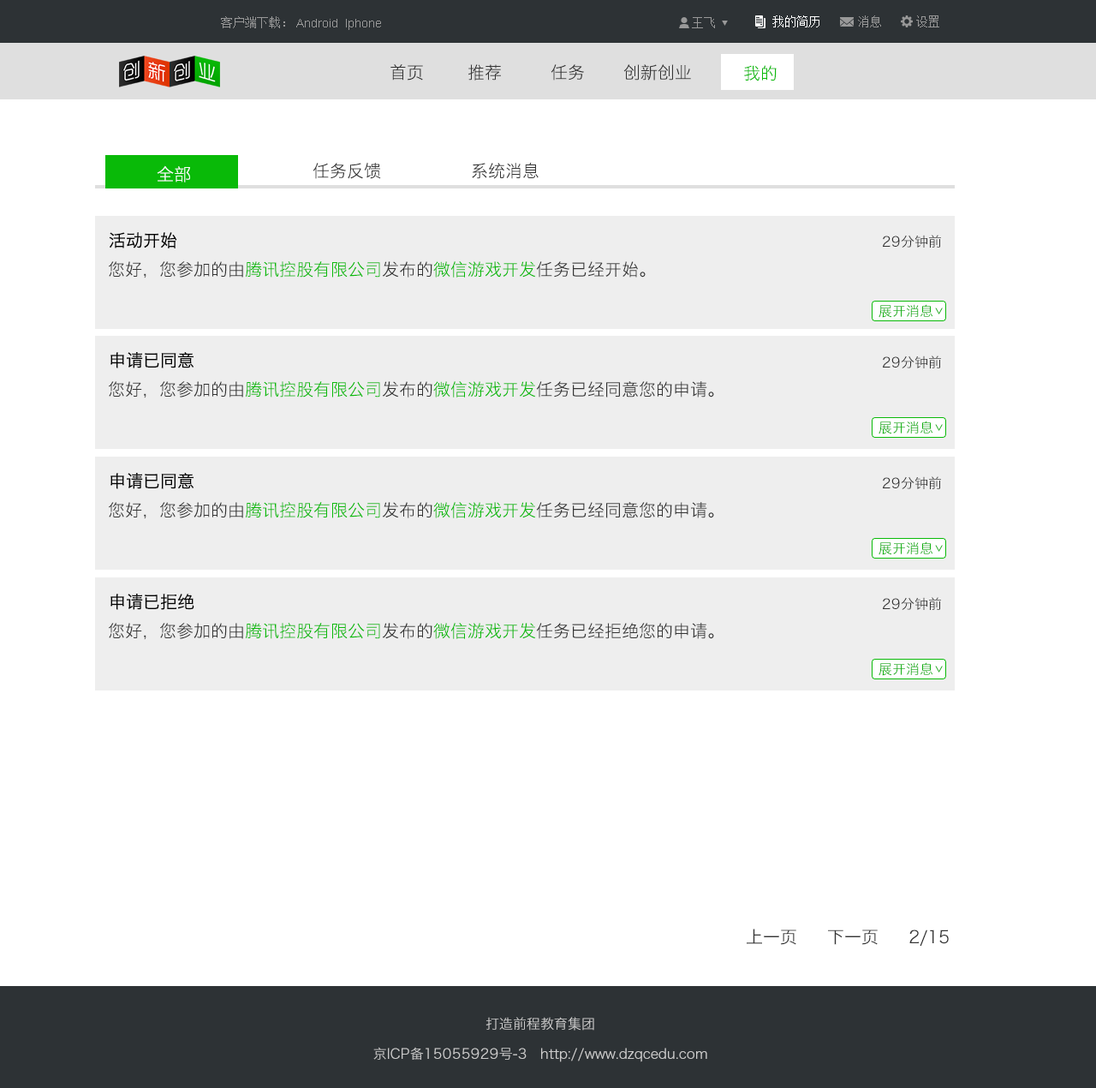
<style>
.page{position:relative;width:1096px;height:1088px;background:#ffffff}
.page>*{position:absolute;margin:0}
.t1{font:12px "SimSun";color:#999999}
.t2{font:12px "SimSun";color:#ffffff}
.t3{font:12px "ArialMT";color:#999999}
.t4{font:17.1px "HiraginoSansGB-W3";color:#333333}
.t5{font:17.1px "HiraginoSansGB-W3";color:#09ba08}
.t6{font:17.1px "HiraginoSansGB-W3";color:#ffffff}
.t7{font:17.1px "HiraginoSansGB-W3";color:#000000}
.t8{font:13.7px "HiraginoSansGB-W3";color:#333333}
.t9{font:13.7px "HiraginoSansGB-W3";color:#0faf0e}
.t10{font:13.3px "HiraginoSansGB-W3";letter-spacing:-0.05em}
.t11{font:13.7px "HiraginoSansGB-W3";color:#cccccc}
</style>
<div class="page">
<p class="t1" style="left:221px;top:16px;width:64px;height:12px">客户端下载：</p>
<p class="t1" style="left:692px;top:17px;width:23px;height:11px">王飞</p>
<p class="t2" style="left:773px;top:15px;width:47px;height:12px">我的简历</p>
<p class="t1" style="left:858px;top:15px;width:23px;height:12px">消息</p>
<p class="t1" style="left:916px;top:15px;width:24px;height:12px">设置</p>
<p class="t3" style="left:296px;top:19px;width:85px;height:11px">Android  Iphone</p>
<p class="t4" style="left:391px;top:64px;width:32px;height:17px">首页</p>
<p class="t4" style="left:468px;top:64px;width:33px;height:17px">推荐</p>
<p class="t4" style="left:551px;top:64px;width:33px;height:17px">任务</p>
<p class="t4" style="left:624px;top:64px;width:67px;height:17px">创新创业</p>
<p class="t5" style="left:744px;top:65px;width:33px;height:16px">我的</p>
<p class="t6" style="left:157px;top:165px;width:33px;height:17px">全部</p>
<p class="t4" style="left:313px;top:163px;width:226px;height:16px">任务反馈               系统消息</p>
<p class="t7" style="left:109px;top:232px;width:68px;height:16px">活动开始</p>
<p class="t8" style="left:883px;top:235px;width:58px;height:13px">29分钟前</p>
<p class="t4" style="left:109px;top:261px;width:537px;height:17px">您好，您参加的由<span class="t5">腾讯控股有限公司</span>发布的<span class="t5">微信游戏开发</span>任务已经开始。</p>
<p class="t9" style="left:879px;top:304px;width:55px;height:14px">展开消息</p>
<p class="t10" style="left:935px;top:307px;width:8px;height:7px;rotate:90deg">&gt;</p>
<p class="t7" style="left:110px;top:352px;width:84px;height:16px">申请已同意</p>
<p class="t8" style="left:883px;top:355px;width:58px;height:13px">29分钟前</p>
<p class="t4" style="left:109px;top:381px;width:605px;height:17px">您好，您参加的由<span class="t5">腾讯控股有限公司</span>发布的<span class="t5">微信游戏开发</span>任务已经同意您的申请。</p>
<p class="t9" style="left:879px;top:421px;width:55px;height:13px">展开消息</p>
<p class="t10" style="left:935px;top:424px;width:8px;height:7px;rotate:90deg">&gt;</p>
<p class="t7" style="left:110px;top:473px;width:84px;height:16px">申请已同意</p>
<p class="t8" style="left:883px;top:476px;width:58px;height:13px">29分钟前</p>
<p class="t4" style="left:109px;top:502px;width:605px;height:17px">您好，您参加的由<span class="t5">腾讯控股有限公司</span>发布的<span class="t5">微信游戏开发</span>任务已经同意您的申请。</p>
<p class="t9" style="left:879px;top:541px;width:55px;height:14px">展开消息</p>
<p class="t10" style="left:935px;top:545px;width:8px;height:7px;rotate:90deg">&gt;</p>
<p class="t7" style="left:110px;top:594px;width:84px;height:16px">申请已拒绝</p>
<p class="t8" style="left:883px;top:597px;width:58px;height:13px">29分钟前</p>
<p class="t4" style="left:109px;top:623px;width:605px;height:17px">您好，您参加的由<span class="t5">腾讯控股有限公司</span>发布的<span class="t5">微信游戏开发</span>任务已经拒绝您的申请。</p>
<p class="t9" style="left:879px;top:662px;width:55px;height:14px">展开消息</p>
<p class="t10" style="left:935px;top:665px;width:8px;height:7px;rotate:90deg">&gt;</p>
<p class="t4" style="left:747px;top:928px;width:202px;height:18px">上一页     下一页     2/15</p>
<p class="t11" style="left:486px;top:1017px;width:108px;height:13px">打造前程教育集团</p>
<p class="t11" style="left:373px;top:1047px;width:334px;height:15px">京ICP备15055929号-3   http://www.dzqcedu.com</p>
</div>
